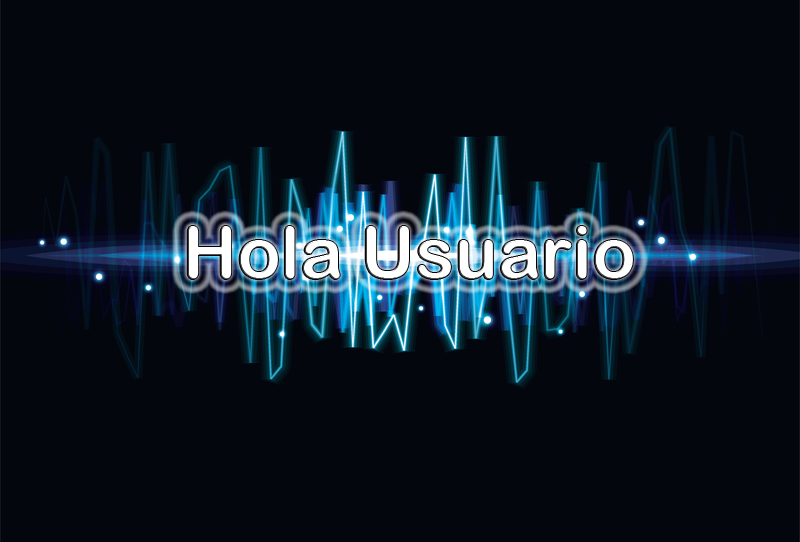
<style>
.page{position:relative;width:800px;height:542px;background:#04060e}
.page>*{position:absolute;margin:0}
.t1{font:72px "ArialRoundedMTBold";color:#ffffff}
</style>
<div class="page">
<p class="t1" style="left:187px;top:226px;width:446px;height:53px">Hola Usuario</p>
</div>
